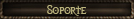
<style>
.page{position:relative;width:134px;height:19px}
.page>*{position:absolute;margin:0}
.t1{font:12px "Morpheus";color:#b9b27c}
</style>
<div class="page">
<p class="t1" style="left:47px;top:5px;width:40px;height:11px">Soporte</p>
</div>
